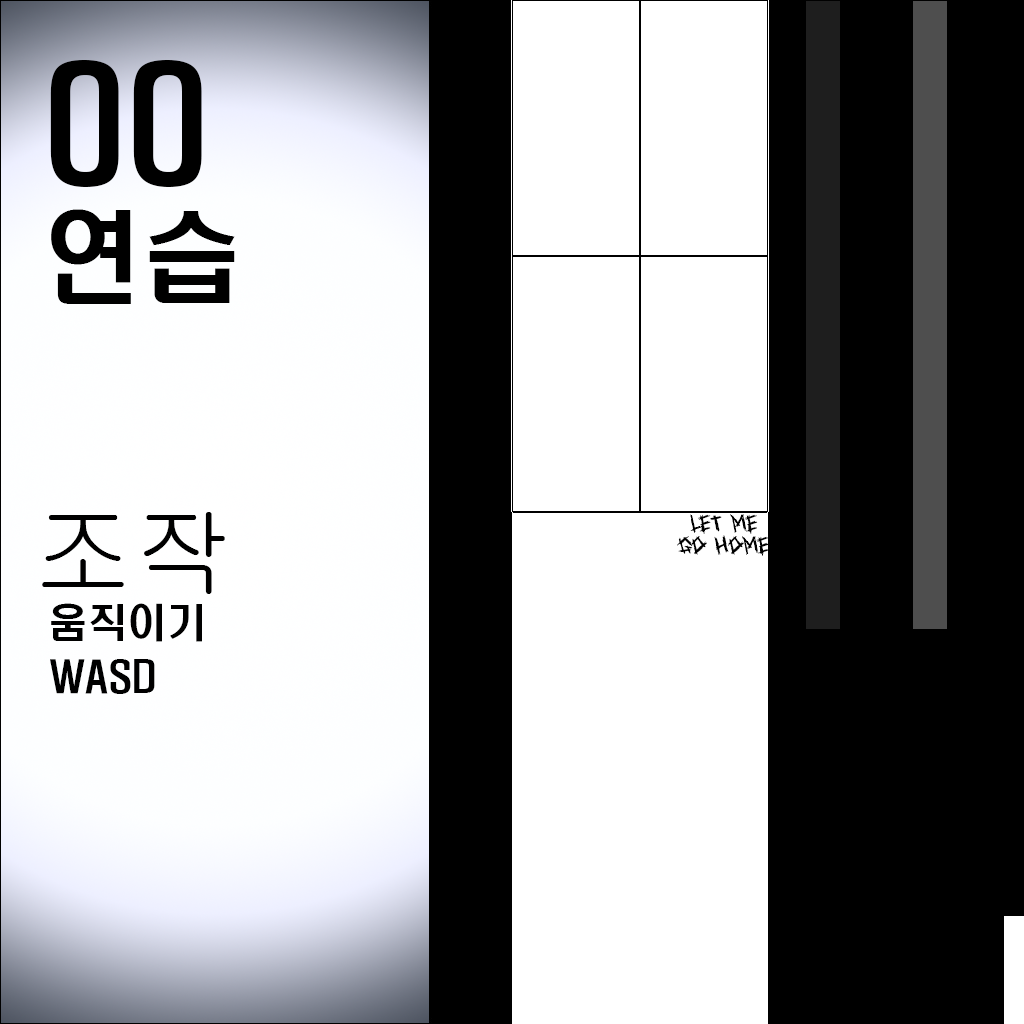
<style>
.page{position:relative;width:1024px;height:1024px;background:#000000}
.page>*{position:absolute;margin:0}
.t1{font:143.8px "H2hdrM";color:#000000}
.t2{font:100px "H2hdrM";color:#000000}
.t3{font:100px "Gulim";color:#000000}
.t4{font:18px "HelpMe";color:#000000}
.t5{font:40px "H2hdrM";color:#000000}
</style>
<div class="page">
<p class="t1" style="left:50px;top:60px;width:152px;height:127px">00</p>
<p class="t2" style="left:51px;top:209px;width:184px;height:95px">연습</p>
<p class="t3" style="left:42px;top:512px;width:183px;height:82px">조작</p>
<p class="t4" style="left:677px;top:514px;width:92px;height:42px;text-align:center">let me<br>go home</p>
<p class="t5" style="left:51px;top:603px;width:151px;height:39px">움직이기</p>
<p class="t5" style="left:50px;top:659px;width:105px;height:35px">WASD</p>
</div>
